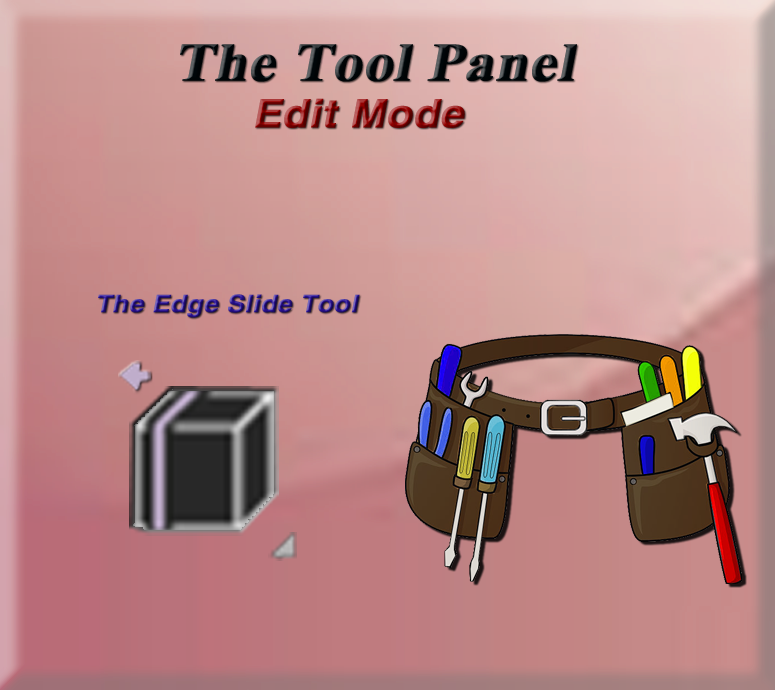
<style>
.page{position:relative;width:775px;height:690px}
.page>*{position:absolute;margin:0}
.t1{font:53.9px "TimesNewRomanPS-BoldMT";color:#000609;font-weight:bold;font-style:italic;scale:1.08 1}
.t2{font:39.1px "HelveticaLTStd-Bold";font-weight:bold;font-style:italic;scale:1.08 1}
.t3{font:53.9px "TimesNewRomanPS-BoldMT";font-weight:bold;font-style:italic;scale:1.08 1}
.t4{font:24.2px "HelveticaLTStd-Bold";font-weight:bold;font-style:italic;scale:1.08 1}
</style>
<div class="page">
<p class="t1" style="left:180px;top:44px;width:397px;height:38px">The Tool Panel</p>
<p class="t2" style="left:255px;top:98px;width:210px;height:30px"><span class="t3"> </span>Edit Mode</p>
<p class="t4" style="left:98px;top:294px;width:262px;height:24px">The Edge Slide Tool</p>
</div>
